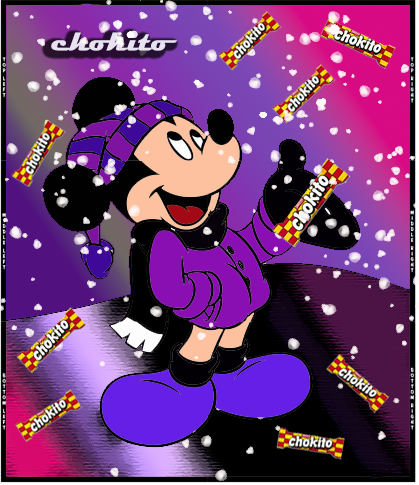
<style>
.page{position:relative;width:419px;height:485px}
.page>*{position:absolute;margin:0}
.t1{font:30px "Magneto-Bold";color:#e7e1f1}
</style>
<div class="page">
<p class="t1" style="left:51px;top:30px;width:126px;height:21px">chokito</p>
</div>
